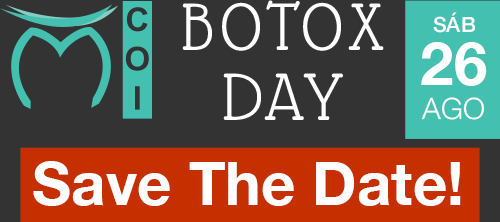
<style>
.page{position:relative;width:500px;height:222px;background:#333333}
.page>*{position:absolute;margin:0}
.t1{font:72.8px "GlassAntiqua-Regular";letter-spacing:0.1em;color:#ffffff;text-transform:uppercase}
.t2{font:21px "HelveticaNeue-Medium";color:#ffffff;text-transform:uppercase}
.t3{font:59.9px "HelveticaNeue-Bold";color:#ffffff;text-transform:uppercase}
.t4{font:29.4px "HelveticaNeue-Light";color:#ffffff;text-transform:uppercase}
.t5{font:59.9px "HelveticaNeue-Bold";color:#ffffff}
</style>
<div class="page">
<p class="t1" style="left:182px;top:0px;width:202px;height:51px">Botox</p>
<p class="t2" style="left:433px;top:12px;width:42px;height:21px">SÁB</p>
<p class="t3" style="left:421px;top:42px;width:66px;height:44px">26</p>
<p class="t1" style="left:223px;top:73px;width:120px;height:47px">DAY</p>
<p class="t4" style="left:421px;top:97px;width:63px;height:23px">AGO</p>
<p class="t5" style="left:33px;top:161px;width:428px;height:45px">Save The Date!</p>
</div>
